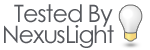
<style>
.page{position:relative;width:150px;height:50px;background:#ffffff}
.page>*{position:absolute;margin:0}
.t1{font:24px "CenturyGothic";letter-spacing:-0.05em;color:#56585d}
</style>
<div class="page">
<p class="t1" style="left:14px;top:4px;width:99px;height:23px">Tested By</p>
<p class="t1" style="left:4px;top:25px;width:110px;height:23px">NexusLight</p>
</div>
